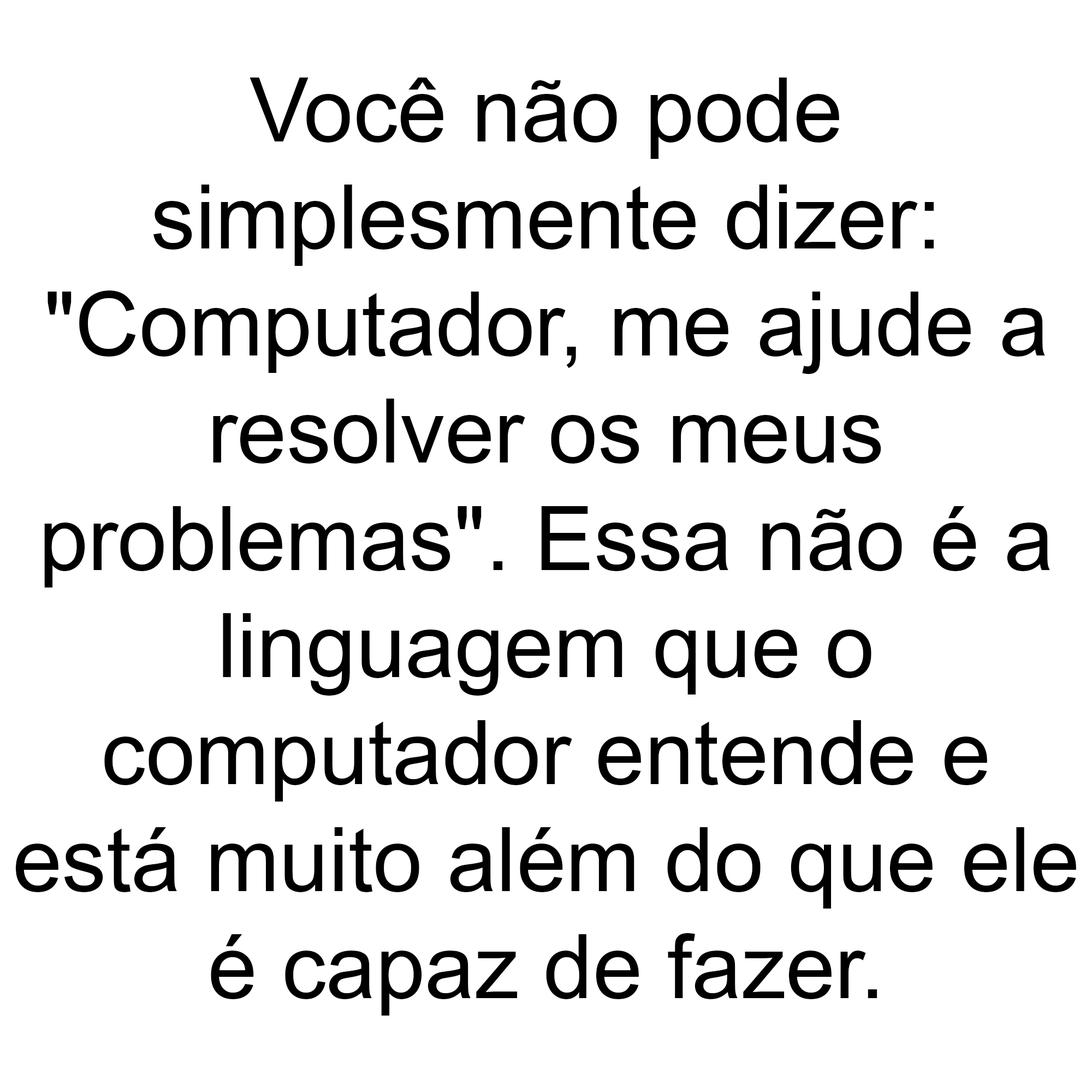
<style>
.page{position:relative;width:1092px;height:1092px;background:#ffffff}
.page>*{position:absolute;margin:0}
.t1{font:89.2px "ArialMT";color:#000000}
</style>
<div class="page">
<p class="t1" style="left:15px;top:78px;width:1061px;height:938px;text-align:center">Você não pode<br>simplesmente dizer:<br>"Computador, me ajude a<br>resolver os meus<br>problemas". Essa não é a<br>linguagem que o<br>computador entende e<br>está muito além do que ele<br>é capaz de fazer.</p>
</div>
